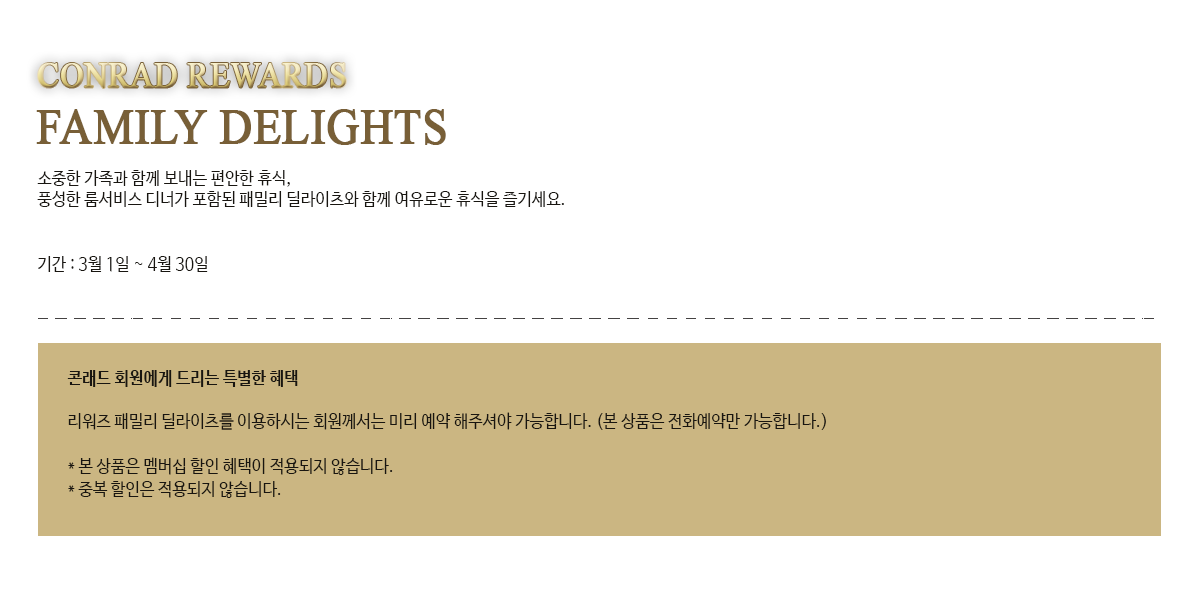
<style>
.page{position:relative;width:1200px;height:600px;background:#ffffff}
.page>*{position:absolute;margin:0}
.t1{font:36px "TimesNewRomanPSMT";font-weight:bold;scale:0.89 1}
.t2{font:50px "TimesNewRomanPSMT";color:#785f37;font-weight:bold;scale:0.9 1}
.t3{font:18px "NanumBarunGothic";color:#181510;scale:0.9 1}
.t4{font:18px "NanumBarunGothicBold";color:#181510;scale:0.9 1}
.t5{font:18px/23.2px "NanumBarunGothic";color:#181510;scale:0.9 1}
</style>
<div class="page">
<p class="t1" style="left:38px;top:63px;width:308px;height:25px">CONRAD REWARDS</p>
<p class="t2" style="left:36px;top:109px;width:410px;height:36px">FAMILY DELIGHTS</p>
<p class="t3" style="left:37px;top:170px;width:527px;height:102px">소중한 가족과 함께 보내는 편안한 휴식,<br>풍성한 룸서비스 디너가 포함된 패밀리 딜라이츠와 함께 여유로운 휴식을 즐기세요.<br><br><br>기간 : 3월 1일 ~ 4월 30일</p>
<p class="t3" style="left:67px;top:370px;width:759px;height:128px"><span class="t4">콘래드 회원에게 드리는 특별한 혜택<br></span><br>리워즈 패밀리 딜라이츠를 이용하시는 회원께서는 미리 예약 해주셔야 가능합니다. (본 상품은 전화예약만 가능합니다.)<br><br><span class="t5">* 본 상품은 멤버십 할인 혜택이 적용되지 않습니다. <br>* 중복 할인은 적용되지 않습니다.</span></p>
</div>
